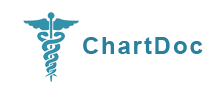
<style>
.page{position:relative;width:221px;height:90px;background:#ffffff}
.page>*{position:absolute;margin:0}
.t1{font:24px "Arial-BoldMT";letter-spacing:0.075em;color:#2a809b}
</style>
<div class="page">
<p class="t1" style="left:83px;top:37px;width:120px;height:17px">ChartDoc</p>
</div>
